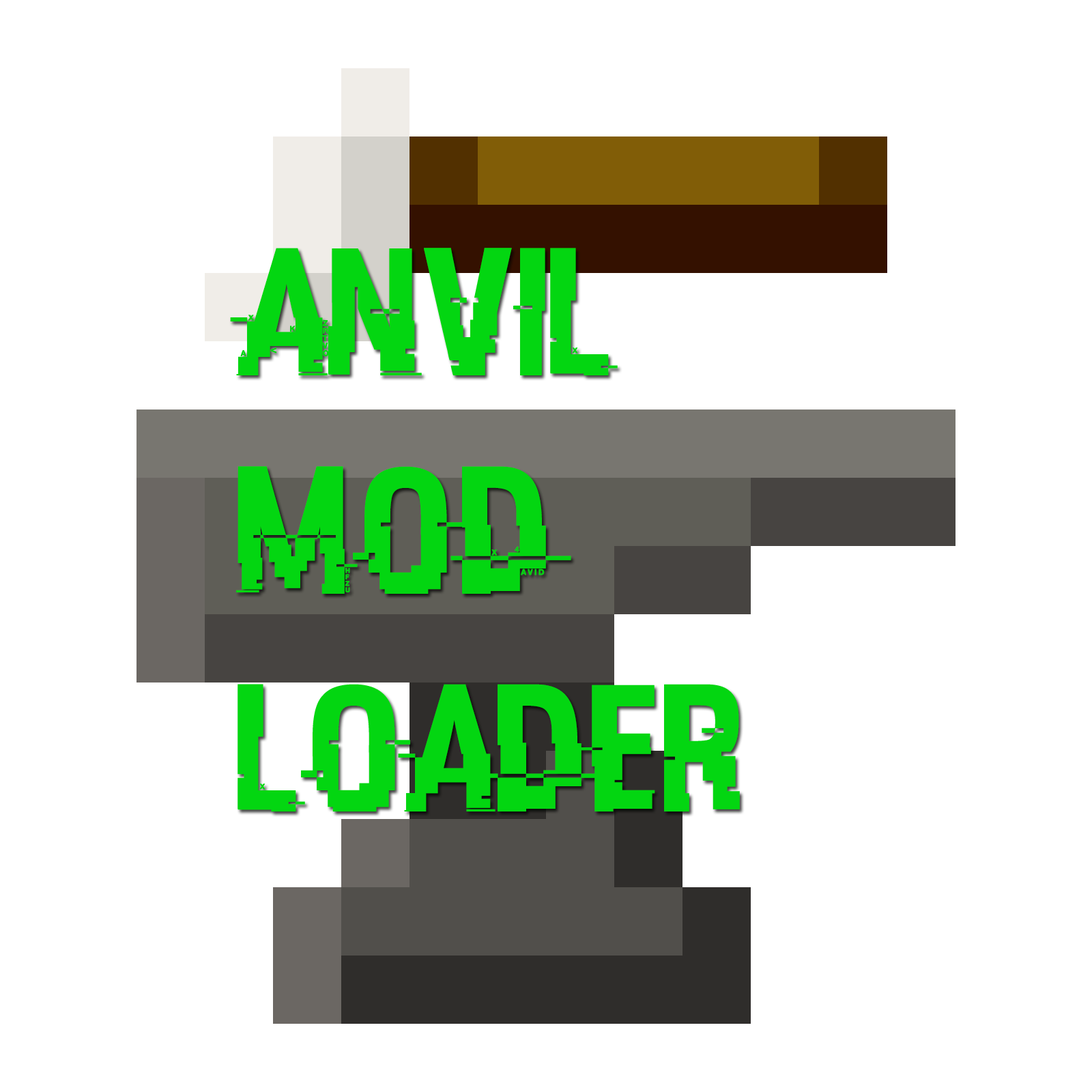
<style>
.page{position:relative;width:1092px;height:1092px;background:#ffffff}
.page>*{position:absolute;margin:0}
.t1{font:181.8px "HACKED";color:#03d611}
</style>
<div class="page">
<p class="t1" style="left:230px;top:248px;width:510px;height:563px">AnviL<br>    MoD<br>    Loader</p>
</div>
